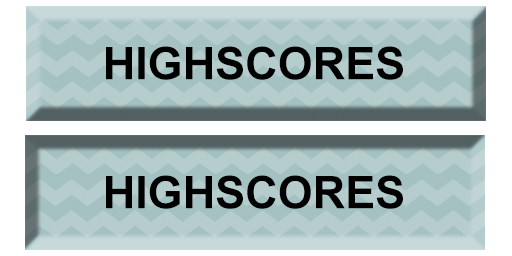
<style>
.page{position:relative;width:512px;height:256px}
.page>*{position:absolute;margin:0}
.t1{font:45px "Arial-BoldMT";color:#000000}
</style>
<div class="page">
<p class="t1" style="left:106px;top:46px;width:297px;height:34px">HIGHSCORES</p>
<p class="t1" style="left:106px;top:175px;width:297px;height:34px">HIGHSCORES</p>
</div>
